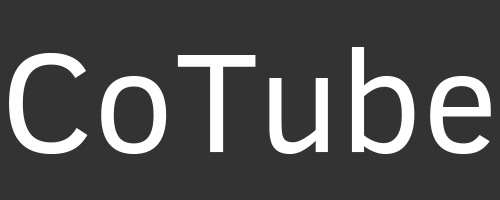
<style>
.page{position:relative;width:500px;height:200px;background:#333333}
.page>*{position:absolute;margin:0}
.t1{font:144px "ClearSans";color:#ffffff}
</style>
<div class="page">
<p class="t1" style="left:9px;top:47px;width:482px;height:107px">CoTube</p>
</div>
